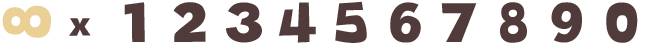
<style>
.page{position:relative;width:648px;height:46px;background:#ffffff}
.page>*{position:absolute;margin:0}
.t1{font:64px "CloudyWithaChanceofLove";letter-spacing:0.01em;color:#ead094}
.t2{font:54px "CloudyWithaChanceofLove";letter-spacing:-0.013em;color:#503a3a}
.t3{font:34px "CloudyWithaChanceofLove";letter-spacing:-0.013em;color:#503a3a}
</style>
<div class="page">
<p class="t1" style="left:2px;top:5px;width:49px;height:33px;rotate:90deg">8</p>
<p class="t2" style="left:124px;top:2px;width:21px;height:40px">1</p>
<p class="t2" style="left:173px;top:2px;width:33px;height:40px">2</p>
<p class="t2" style="left:226px;top:2px;width:36px;height:41px">3</p>
<p class="t2" style="left:279px;top:2px;width:37px;height:41px">4</p>
<p class="t2" style="left:335px;top:1px;width:32px;height:42px">5</p>
<p class="t2" style="left:390px;top:2px;width:31px;height:41px">6</p>
<p class="t2" style="left:441px;top:3px;width:36px;height:39px">7</p>
<p class="t2" style="left:500px;top:2px;width:27px;height:41px">8</p>
<p class="t2" style="left:551px;top:2px;width:31px;height:41px">9</p>
<p class="t2" style="left:606px;top:2px;width:32px;height:41px">0</p>
<p class="t3" style="left:69px;top:18px;width:22px;height:18px">x</p>
</div>
